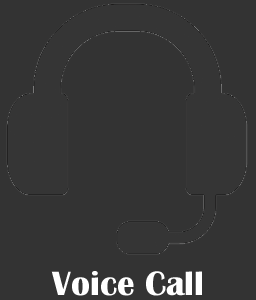
<style>
.page{position:relative;width:256px;height:300px;background:#333333}
.page>*{position:absolute;margin:0}
.t1{font:35px "BritannicBold";color:#ffffff}
</style>
<div class="page">
<p class="t1" style="left:51px;top:271px;width:151px;height:25px">Voice Call</p>
</div>
